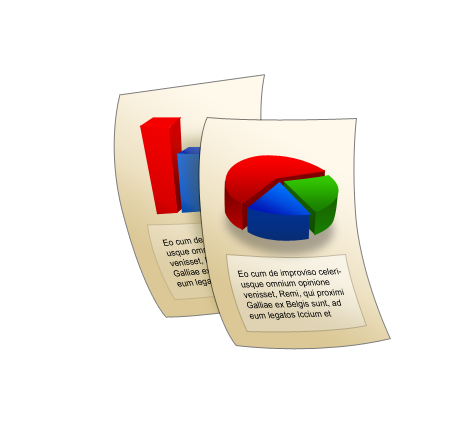
<style>
.page{position:relative;width:470px;height:448px;background:#ffffff}
.page>*{position:absolute;margin:0}
.t1{font:9px "ArialMT";scale:0.93 1}
</style>
<div class="page">
<p class="t1" style="left:162px;top:230px;width:108px;height:57px;rotate:-5deg">Eo cum de improviso celeriusque omnium opinione venisset, Remi, qui proximi Galliae ex Belgis sunt, ad eum legatos Iccium et Andebrogium, primos civitatis, miserunt, qui <br>dicerent se suaque omnia in fidem atque potestatem populi <br>Romani permittere, neque se cum reliquis Belgis consensisse <br>neque contra populum Romanum coniurasse, paratosque esse et <br>obsides dare et imperata facere et oppidis recipere et <br>frumento ceterisque rebus iuvare; reliquos omnes Belgas in <br>armis esse, Germanosque qui cis Rhenum incolant sese cum his <br>coniunxisse, tantumque esse eorum omnium furorem ut ne <br>Suessiones quidem, fratres consanguineosque suos, qui eodem <br>iure et isdem legibus utantur, unum imperium unumque <br>magistratum cum ipsis habeant, deterrere potuerint quin cum <br>iis consentirent.</p>
<p class="t1" style="left:237px;top:268px;width:107px;height:52px;rotate:-2deg">Eo cum de improviso celeriusque omnium opinione venisset, Remi, qui proximi Galliae ex Belgis sunt, ad eum legatos Iccium et Andebrogium, primos civitatis, miserunt, qui <br>dicerent se suaque omnia in fidem atque potestatem populi <br>Romani permittere, neque se cum reliquis Belgis consensisse <br>neque contra populum Romanum coniurasse, paratosque esse et <br>obsides dare et imperata facere et oppidis recipere et <br>frumento ceterisque rebus iuvare; reliquos omnes Belgas in <br>armis esse, Germanosque qui cis Rhenum incolant sese cum his <br>coniunxisse, tantumque esse eorum omnium furorem ut ne <br>Suessiones quidem, fratres consanguineosque suos, qui eodem <br>iure et isdem legibus utantur, unum imperium unumque <br>magistratum cum ipsis habeant, deterrere potuerint quin cum <br>iis consentirent.</p>
</div>
